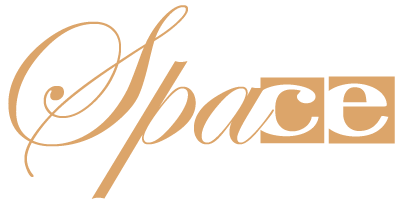
<style>
.page{position:relative;width:401px;height:199px;background:#ffffff}
.page>*{position:absolute;margin:0}
.t1{font:208.3px "EdwardianScriptITC";color:#dca56a}
.t2{font:100px "NegativeSpace-Regular";color:#dca56a}
</style>
<div class="page">
<p class="t1" style="left:8px;top:5px;width:266px;height:194px">Spa</p>
<p class="t2" style="left:260px;top:76px;width:135px;height:68px">CE</p>
</div>
